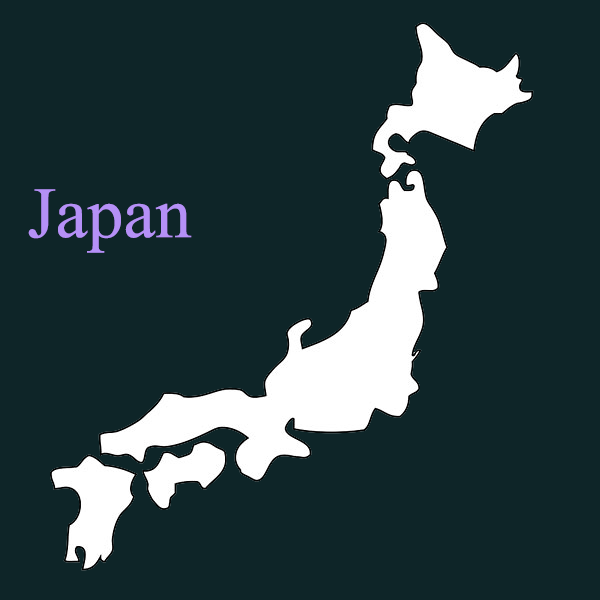
<style>
.page{position:relative;width:600px;height:600px;background:#0e2528}
.page>*{position:absolute;margin:0}
.t1{font:72px "TimesNewRomanPSMT";color:#b590f7}
</style>
<div class="page">
<p class="t1" style="left:28px;top:189px;width:164px;height:64px">Japan</p>
</div>
